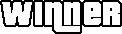
<style>
.page{position:relative;width:122px;height:34px;background:#fcfcfc}
.page>*{position:absolute;margin:0}
.t1{font:36px "PricedownBl-Regular";letter-spacing:0.03em;color:#fcfcfc}
</style>
<div class="page">
<p class="t1" style="left:2px;top:2px;width:118px;height:30px">winner</p>
</div>
